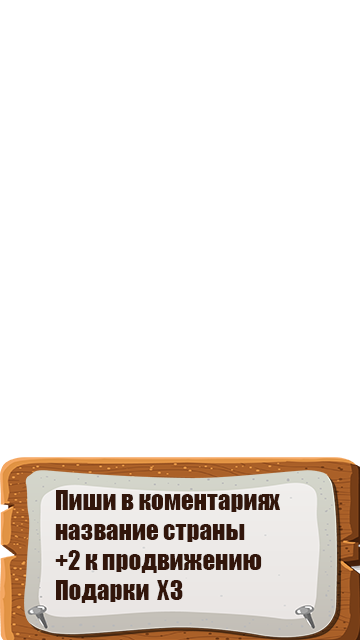
<style>
.page{position:relative;width:360px;height:640px;background:#ffffff}
.page>*{position:absolute;margin:0}
.t1{font:25px/30px "Impact";color:#32160b}
</style>
<div class="page">
<p class="t1" style="left:55px;top:490px;width:225px;height:113px">Пиши в коментариях<br>название страны <br>+2 к продвижению<br>Подарки  Х3</p>
</div>
